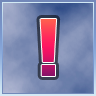
<style>
.page{position:relative;width:96px;height:96px}
.page>*{position:absolute;margin:0}
.t1{font:72px "Impact"}
</style>
<div class="page">
<p class="t1" style="left:40px;top:19px;width:17px;height:57px">!</p>
</div>
